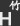
<style>
.page{position:relative;width:20px;height:26px;background:#333333}
.page>*{position:absolute;margin:0}
.t1{font:12px "DFKaiShu-SB-Estd-BF";color:#ececec;font-weight:bold}
.t2{font:18px "ArialMT";color:#ececec;font-weight:bold}
</style>
<div class="page">
<p class="t1" style="left:9px;top:0px;width:12px;height:11px">竹</p>
<p class="t2" style="left:0px;top:12px;width:11px;height:14px">H</p>
</div>
